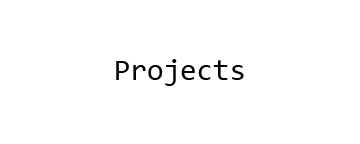
<style>
.page{position:relative;width:360px;height:144px;background:#ffffff}
.page>*{position:absolute;margin:0}
.t1{font:30px "Consolas";color:#000309}
</style>
<div class="page">
<p class="t1" style="left:116px;top:59px;width:128px;height:27px">Projects</p>
</div>
